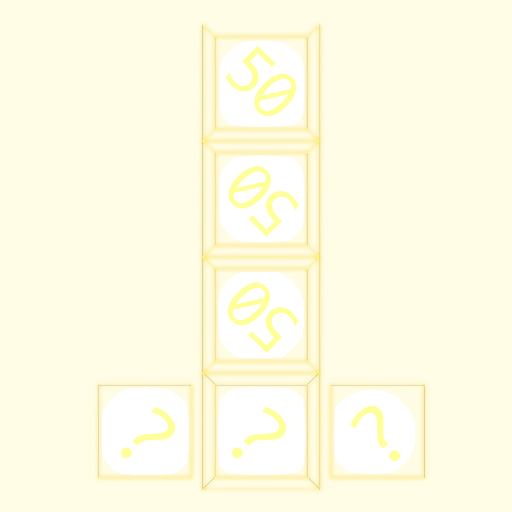
<style>
.page{position:relative;width:512px;height:512px;background:#fffde5}
.page>*{position:absolute;margin:0}
.t1{font:60px "Ayuthaya";letter-spacing:-0.025em;color:#ffff9a}
.t2{font:76.9px "Ayuthaya";letter-spacing:-0.025em;color:#ffff9a}
</style>
<div class="page">
<p class="t1" style="left:225px;top:45px;width:72px;height:72px;rotate:44deg">50</p>
<p class="t1" style="left:228px;top:166px;width:71px;height:71px;rotate:-135deg">50</p>
<p class="t1" style="left:227px;top:282px;width:72px;height:71px;rotate:-136deg">50</p>
<p class="t2" style="left:121px;top:407px;width:54px;height:52px;rotate:44deg">?</p>
<p class="t2" style="left:232px;top:407px;width:54px;height:52px;rotate:44deg">?</p>
<p class="t2" style="left:350px;top:406px;width:50px;height:55px;rotate:-43deg">?</p>
</div>
